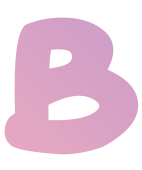
<style>
.page{position:relative;width:142px;height:170px;background:#ffffff}
.page>*{position:absolute;margin:0}
.t1{font:150px "Starborn";color:#d9a2c4}
</style>
<div class="page">
<p class="t1" style="left:4px;top:17px;width:135px;height:138px">b</p>
</div>
